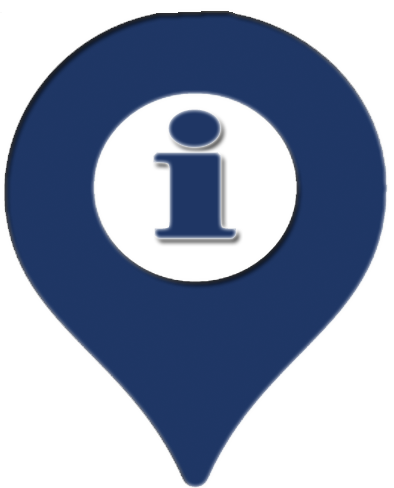
<style>
.page{position:relative;width:394px;height:488px;background:#ffffff}
.page>*{position:absolute;margin:0}
.t1{font:166.3px "Elephant-Regular";color:#1f3664;font-weight:bold;scale:1.38 1}
</style>
<div class="page">
<p class="t1" style="left:153px;top:109px;width:83px;height:130px">i</p>
</div>
